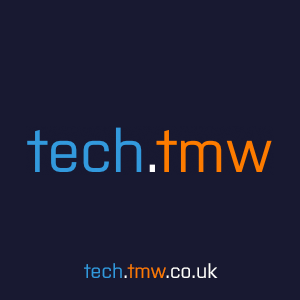
<style>
.page{position:relative;width:300px;height:300px;background:#181931}
.page>*{position:absolute;margin:0}
.t1{font:20px "Purista-Medium";color:#ffffff}
.t2{font:20px "Purista-Medium";color:#3299dd}
.t3{font:20px "Purista-Medium";color:#fd7b00}
</style>
<div class="page">
<p class="t1" style="left:84px;top:263px;width:134px;height:15px"><span class="t2">tech</span>.<span class="t3">tmw</span>.co.uk</p>
</div>
